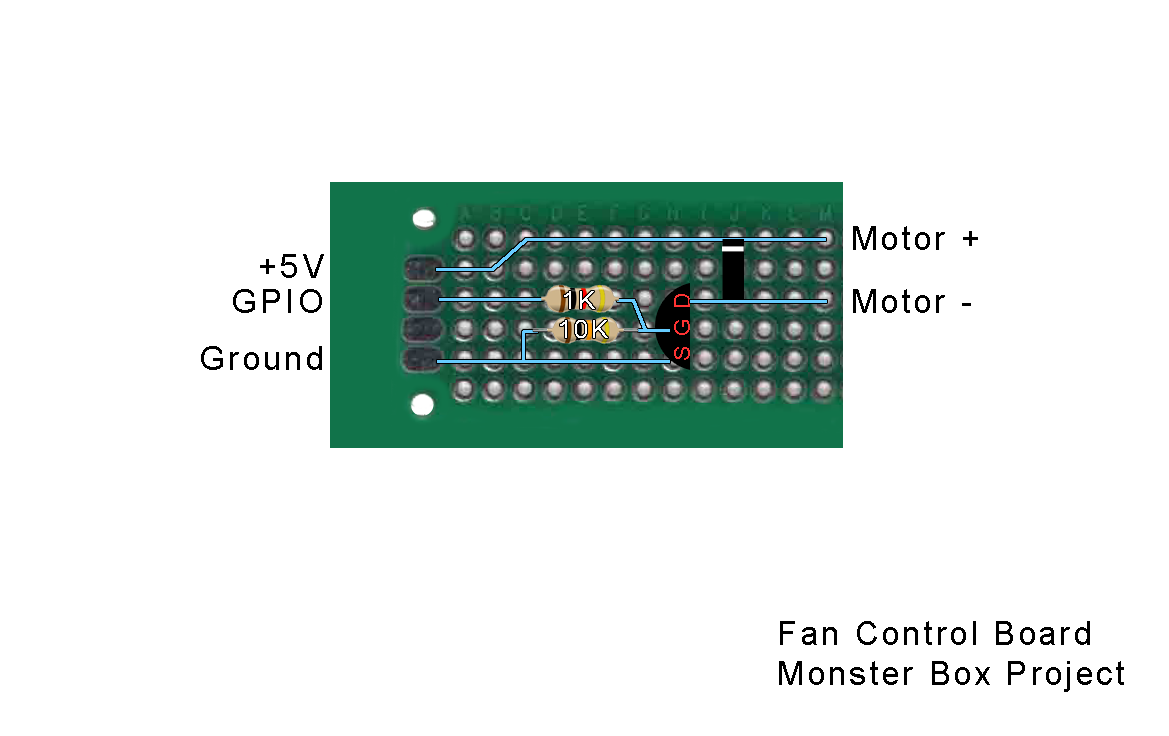
<style>
.page{position:relative;width:1169px;height:736px;background:#ffffff}
.page>*{position:absolute;margin:0}
.t1{font:33.3px "ArialMT";letter-spacing:0.1em;color:#000000}
.t2{font:25px "ArialMT";letter-spacing:0.1em;color:#ffffff}
.t3{font:21.8px "ArialMT";letter-spacing:0.1em;color:#ff3333}
</style>
<div class="page">
<p class="t1" style="left:853px;top:226px;width:125px;height:24px">Motor +</p>
<p class="t1" style="left:260px;top:254px;width:64px;height:24px">+5V</p>
<p class="t1" style="left:233px;top:289px;width:89px;height:24px">GPIO</p>
<p class="t2" style="left:564px;top:291px;width:31px;height:18px">1K</p>
<p class="t3" style="left:674px;top:294px;width:16px;height:66px;rotate:-90deg">S G D</p>
<p class="t1" style="left:853px;top:289px;width:118px;height:24px">Motor -</p>
<p class="t2" style="left:560px;top:320px;width:48px;height:18px">10K</p>
<p class="t1" style="left:201px;top:346px;width:121px;height:24px">Ground</p>
<p class="t1" style="left:779px;top:621px;width:345px;height:71px">Fan Control Board<br>Monster Box Project</p>
</div>
